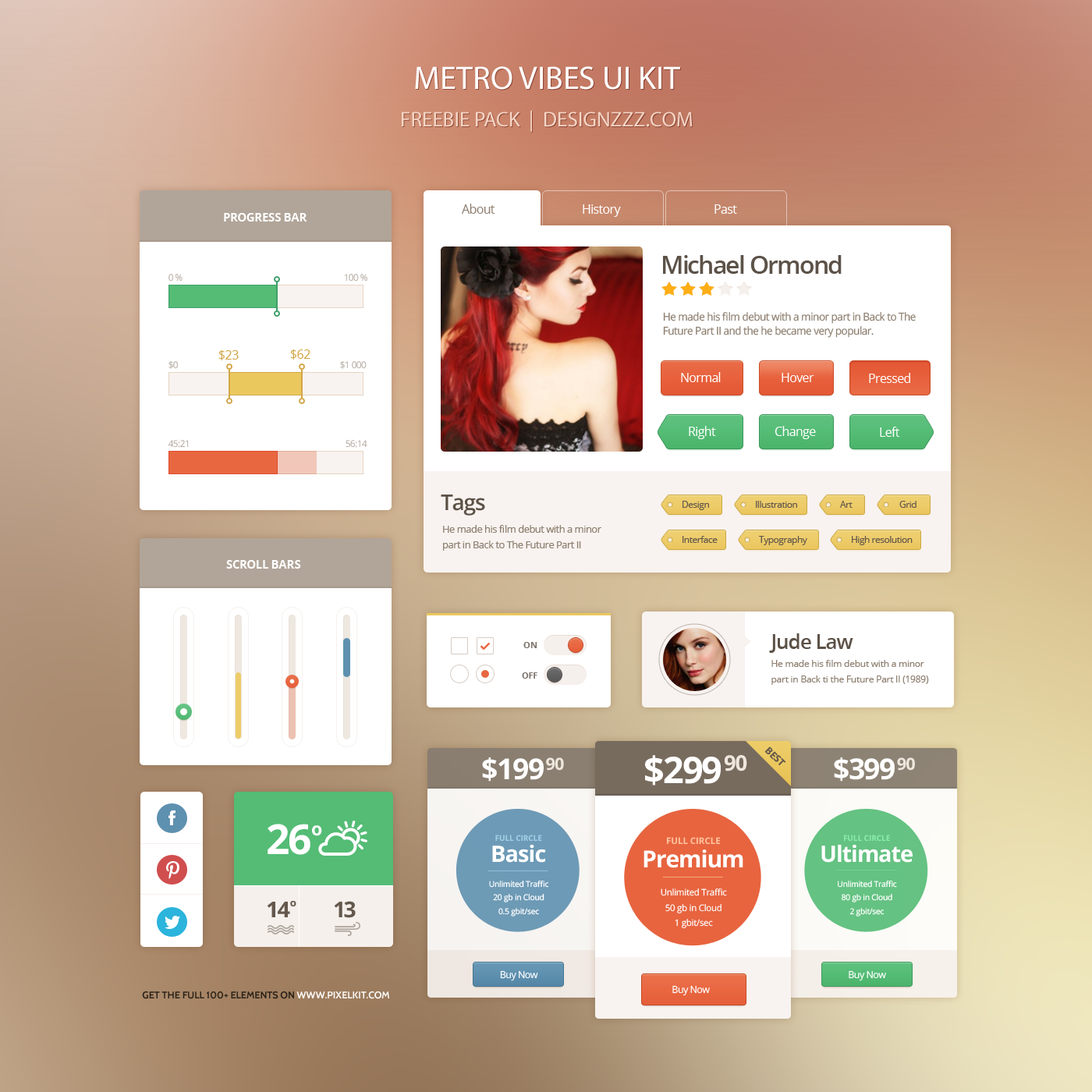
<style>
.page{position:relative;width:1092px;height:1092px}
.page>*{position:absolute;margin:0}
.t1{font:21.1px/37.4px "MyriadPro-Regular";color:#f5d6c6;text-transform:uppercase}
.t2{font:32.8px/37.4px "MyriadPro-Regular";color:#ffffff;text-transform:uppercase}
.t3{font:12.5px "OpenSans";letter-spacing:-0.04em;color:#8e8071}
.t4{font:12.5px "OpenSans";letter-spacing:-0.04em;color:#ffffff}
.t5{font:11.7px "OpenSans-Bold";letter-spacing:-0.025em;color:#ffffff;text-transform:uppercase}
.t6{font:25px "OpenSans-Semibold";letter-spacing:-0.05em;color:#5c5248}
.t7{font:9.4px "OpenSans";letter-spacing:-0.04em}
.t8{font:9.4px "OpenSans";letter-spacing:-0.04em;color:#bbb3aa}
.t9{font:10.9px/14px "OpenSans";letter-spacing:-0.04em;color:#8e8071}
.t10{font:12.5px "OpenSans";letter-spacing:-0.025em;color:#d3a648}
.t11{font:21.8px "OpenSans-Semibold";letter-spacing:-0.04em;color:#5c5146}
.t12{font:9.4px "OpenSans";letter-spacing:-0.04em;color:#64584c}
.t13{font:10.1px/15.7px "OpenSans";letter-spacing:-0.04em;color:#8e8071}
.t14{font:8.6px "OpenSans-Bold";letter-spacing:-0.025em;color:#7d746b;text-transform:uppercase}
.t15{font:20.3px "OpenSans-Semibold";letter-spacing:-0.04em;color:#5c5146}
.t16{font:9.4px/15.6px "OpenSans";letter-spacing:-0.02em;color:#8e8071}
.t17{font:10.4px "MyriadPro-Bold";letter-spacing:-0.02em;color:#64584c;text-transform:uppercase}
.t18{font:28.9px "OpenSans-Bold";letter-spacing:-0.04em;color:#ffffff}
.t19{font:28.9px "OpenSans-Bold";letter-spacing:-0.04em;color:#efe7de}
.t20{font:36.7px "OpenSans-Bold";letter-spacing:-0.04em;color:#ffffff}
.t21{font:36.7px "OpenSans-Bold";letter-spacing:-0.04em;color:#efe7de}
.t22{font:41.3px "OpenSans-Bold";letter-spacing:-0.04em;color:#ffffff}
.t23{font:30.7px "OpenSans-Bold";letter-spacing:-0.02em;color:#ffffff}
.t24{font:7.8px/17.4px "OpenSans-Bold";letter-spacing:-0.005em;color:#a4cee7;text-transform:uppercase}
.t25{font:22.6px/21.1px "OpenSans-Bold";letter-spacing:-0.025em;color:#ffffff}
.t26{font:9px/19.3px "OpenSans-Bold";letter-spacing:-0.005em;color:#ffc19b;text-transform:uppercase}
.t27{font:23.4px/23.5px "OpenSans-Bold";letter-spacing:-0.025em;color:#ffffff}
.t28{font:7.8px/17.4px "OpenSans-Bold";letter-spacing:-0.005em;color:#89eca8;text-transform:uppercase}
.t29{font:8.1px/13.7px "OpenSans";letter-spacing:-0.025em;color:#ffffff}
.t30{font:9px/15.2px "OpenSans";letter-spacing:-0.025em;color:#ffffff}
.t31{font:21.8px "OpenSans-Bold";letter-spacing:-0.04em;color:#64584c;scale:1.03 1}
.t32{font:17.2px "OpenSans-Bold";letter-spacing:-0.02em;color:#64584c;scale:1.03 1}
.t33{font:21.8px "OpenSans-Bold";letter-spacing:-0.04em;color:#64584c}
.t34{font:9.7px "OpenSans";letter-spacing:-0.04em;color:#ffffff}
</style>
<div class="page">
<p class="t1" style="left:402px;top:66px;width:291px;height:66px;text-align:center"><span class="t2">Metro Vibes UI KIT<br></span>FreeBIE PACK  |  designzzz.com</p>
<p class="t3" style="left:462px;top:204px;width:33px;height:10px">About</p>
<p class="t4" style="left:583px;top:204px;width:38px;height:13px">History</p>
<p class="t4" style="left:714px;top:204px;width:23px;height:10px">Past</p>
<p class="t5" style="left:224px;top:213px;width:83px;height:9px">Progress bar</p>
<p class="t6" style="left:663px;top:255px;width:179px;height:19px">Michael Ormond</p>
<p class="t7" style="left:168px;top:274px;width:15px;height:8px">0 %</p>
<p class="t8" style="left:344px;top:274px;width:23px;height:8px">100 %</p>
<p class="t9" style="left:663px;top:312px;width:253px;height:26px">He made his film debut with a minor part in Back to The <br>Future Part II and the he became very popular.</p>
<p class="t10" style="left:218px;top:350px;width:21px;height:10px">$23</p>
<p class="t10" style="left:290px;top:349px;width:20px;height:11px">$62</p>
<p class="t7" style="left:168px;top:360px;width:11px;height:9px">$0</p>
<p class="t8" style="left:340px;top:360px;width:27px;height:9px">$1 000</p>
<p class="t4" style="left:681px;top:372px;width:40px;height:10px">Normal</p>
<p class="t4" style="left:782px;top:373px;width:32px;height:9px">Hover</p>
<p class="t4" style="left:869px;top:373px;width:41px;height:10px">Pressed</p>
<p class="t4" style="left:689px;top:426px;width:27px;height:13px">Right</p>
<p class="t4" style="left:775px;top:426px;width:41px;height:13px">Change</p>
<p class="t4" style="left:880px;top:427px;width:20px;height:10px">Left</p>
<p class="t8" style="left:168px;top:440px;width:21px;height:8px">45:21</p>
<p class="t8" style="left:346px;top:440px;width:21px;height:8px">56:14</p>
<p class="t11" style="left:441px;top:495px;width:44px;height:21px">Tags</p>
<p class="t12" style="left:682px;top:501px;width:27px;height:9px">Design</p>
<p class="t12" style="left:756px;top:501px;width:41px;height:7px">Illustration</p>
<p class="t12" style="left:840px;top:501px;width:13px;height:7px">Art</p>
<p class="t12" style="left:899px;top:501px;width:17px;height:7px">Grid</p>
<p class="t13" style="left:443px;top:525px;width:158px;height:26px">He made his film debut with a minor <br>part in Back to The Future Part II</p>
<p class="t12" style="left:682px;top:536px;width:36px;height:7px">Interface</p>
<p class="t12" style="left:759px;top:536px;width:48px;height:9px">Typography</p>
<p class="t12" style="left:852px;top:536px;width:61px;height:9px">High resolution</p>
<p class="t5" style="left:226px;top:560px;width:75px;height:9px">Scroll Bars</p>
<p class="t14" style="left:523px;top:642px;width:14px;height:6px">On</p>
<p class="t15" style="left:769px;top:633px;width:84px;height:20px">Jude Law</p>
<p class="t16" style="left:771px;top:660px;width:158px;height:25px">He made his film debut with a minor<br>part in Back ti the Future Part II (1989)</p>
<p class="t14" style="left:522px;top:672px;width:15px;height:7px">off</p>
<p class="t17" style="left:764px;top:746px;width:22px;height:20px;rotate:45deg">Best</p>
<p class="t18" style="left:482px;top:757px;width:82px;height:25px">$199<span class="t19">90</span></p>
<p class="t20" style="left:645px;top:755px;width:102px;height:30px">$299<span class="t21">90</span></p>
<p class="t18" style="left:834px;top:757px;width:81px;height:25px">$399<span class="t19">90</span></p>
<p class="t22" style="left:268px;top:824px;width:54px;height:31px">26<span class="t23">o</span></p>
<p class="t24" style="left:492px;top:835px;width:54px;height:28px;text-align:center">full circle<br><span class="t25">Basic</span></p>
<p class="t26" style="left:643px;top:837px;width:100px;height:31px;text-align:center">full circle<br><span class="t27">Premium</span></p>
<p class="t28" style="left:821px;top:835px;width:92px;height:28px;text-align:center">full circle<br><span class="t25">Ultimate</span></p>
<p class="t29" style="left:489px;top:881px;width:60px;height:35px;text-align:center">Unlimited Traffic<br>20 gb in Cloud<br>0.5 gbit/sec</p>
<p class="t29" style="left:838px;top:881px;width:59px;height:35px;text-align:center">Unlimited Traffic<br>80 gb in Cloud<br>2 gbit/sec</p>
<p class="t30" style="left:661px;top:888px;width:66px;height:40px;text-align:center">Unlimited Traffic<br>50 gb in Cloud<br>1 gbit/sec</p>
<p class="t31" style="left:267px;top:900px;width:29px;height:17px">14<span class="t32">o</span></p>
<p class="t33" style="left:334px;top:901px;width:22px;height:17px">13</p>
<p class="t34" style="left:500px;top:970px;width:38px;height:11px">Buy Now</p>
<p class="t34" style="left:849px;top:970px;width:37px;height:11px">Buy Now</p>
<p class="t34" style="left:672px;top:985px;width:38px;height:11px">Buy Now</p>
</div>
